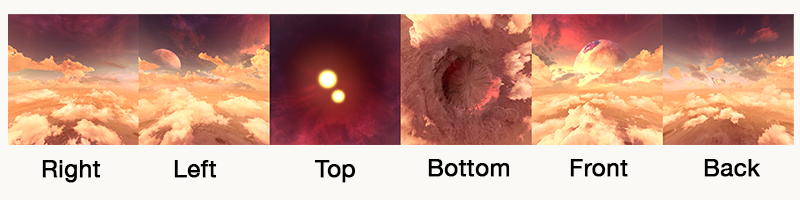
<style>
.page{position:relative;width:800px;height:200px;background:#fbf9f5}
.page>*{position:absolute;margin:0}
.t1{font:24px "HelveticaNeue";color:#000000;font-weight:bold}
</style>
<div class="page">
<p class="t1" style="left:42px;top:160px;width:59px;height:23px">Right</p>
<p class="t1" style="left:174px;top:160px;width:43px;height:18px">Left</p>
<p class="t1" style="left:314px;top:160px;width:42px;height:23px">Top</p>
<p class="t1" style="left:428px;top:159px;width:82px;height:18px">Bottom</p>
<p class="t1" style="left:570px;top:159px;width:58px;height:18px">Front</p>
<p class="t1" style="left:704px;top:159px;width:57px;height:18px">Back</p>
</div>
